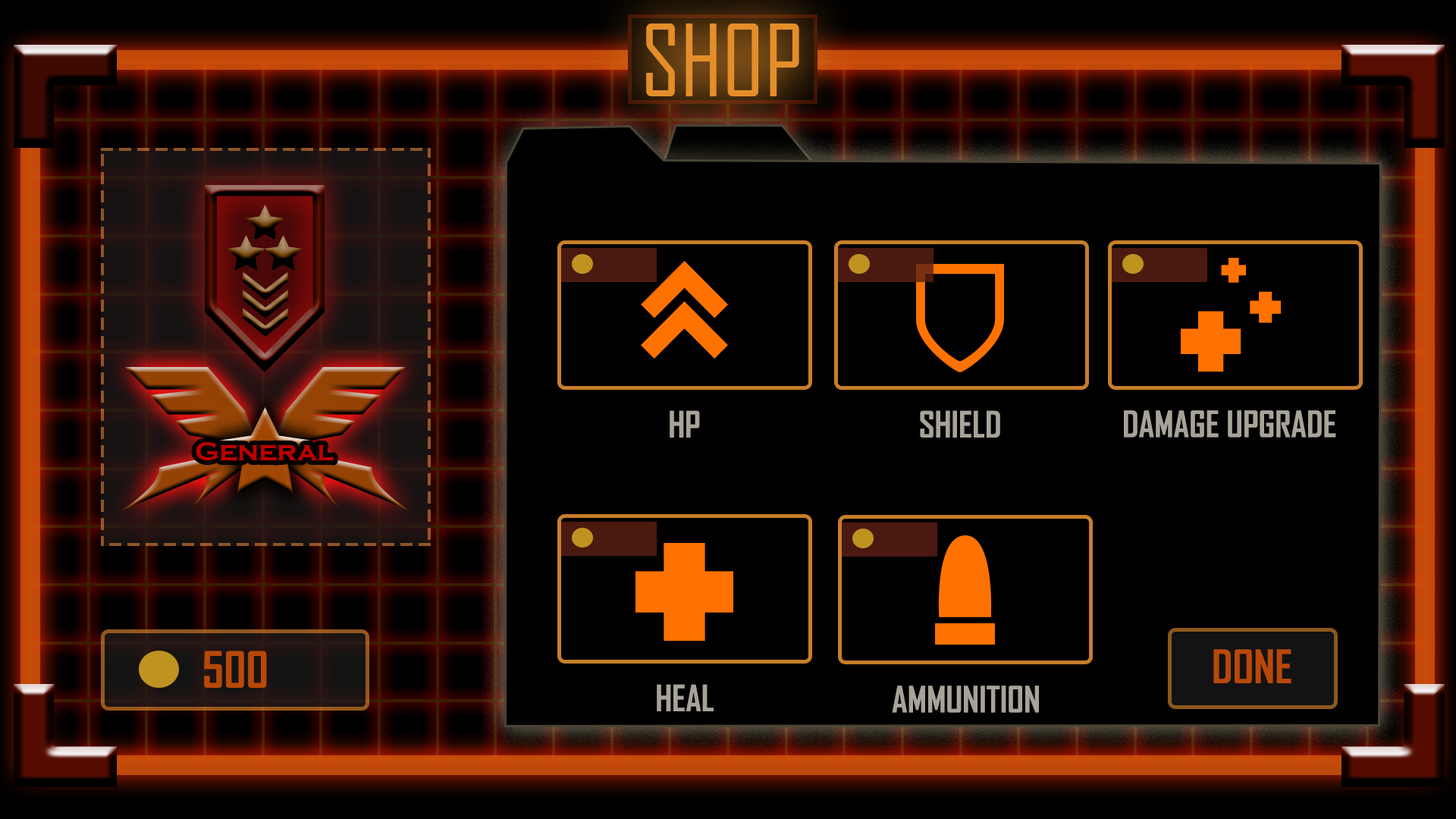
<style>
.page{position:relative;width:1456px;height:819px;background:#000000}
.page>*{position:absolute;margin:0}
.t1{font:94.8px "AgencyFB-Reg";color:#e38e2a}
.t2{font:34.8px "AgencyFB-Bold";color:#a7a398}
.t3{font:28.4px "CopperplateGothic-Bold";color:#bb0000}
.t4{font:47.7px "AgencyFB-Bold";color:#b84809}
.t5{font:44.2px "AgencyFB-Bold";color:#b84809}
</style>
<div class="page">
<p class="t1" style="left:646px;top:24px;width:153px;height:72px">SHOP</p>
<p class="t2" style="left:670px;top:410px;width:30px;height:28px">HP</p>
<p class="t2" style="left:920px;top:410px;width:80px;height:28px">SHIELD</p>
<p class="t2" style="left:1124px;top:410px;width:212px;height:28px">DAMAGE UPGRADE</p>
<p class="t3" style="left:196px;top:442px;width:138px;height:19px">General</p>
<p class="t4" style="left:204px;top:651px;width:63px;height:37px">500</p>
<p class="t5" style="left:1213px;top:649px;width:78px;height:34px">DONE</p>
<p class="t2" style="left:657px;top:684px;width:57px;height:27px">HEAL</p>
<p class="t2" style="left:892px;top:686px;width:147px;height:27px">AMMUNITION</p>
</div>
